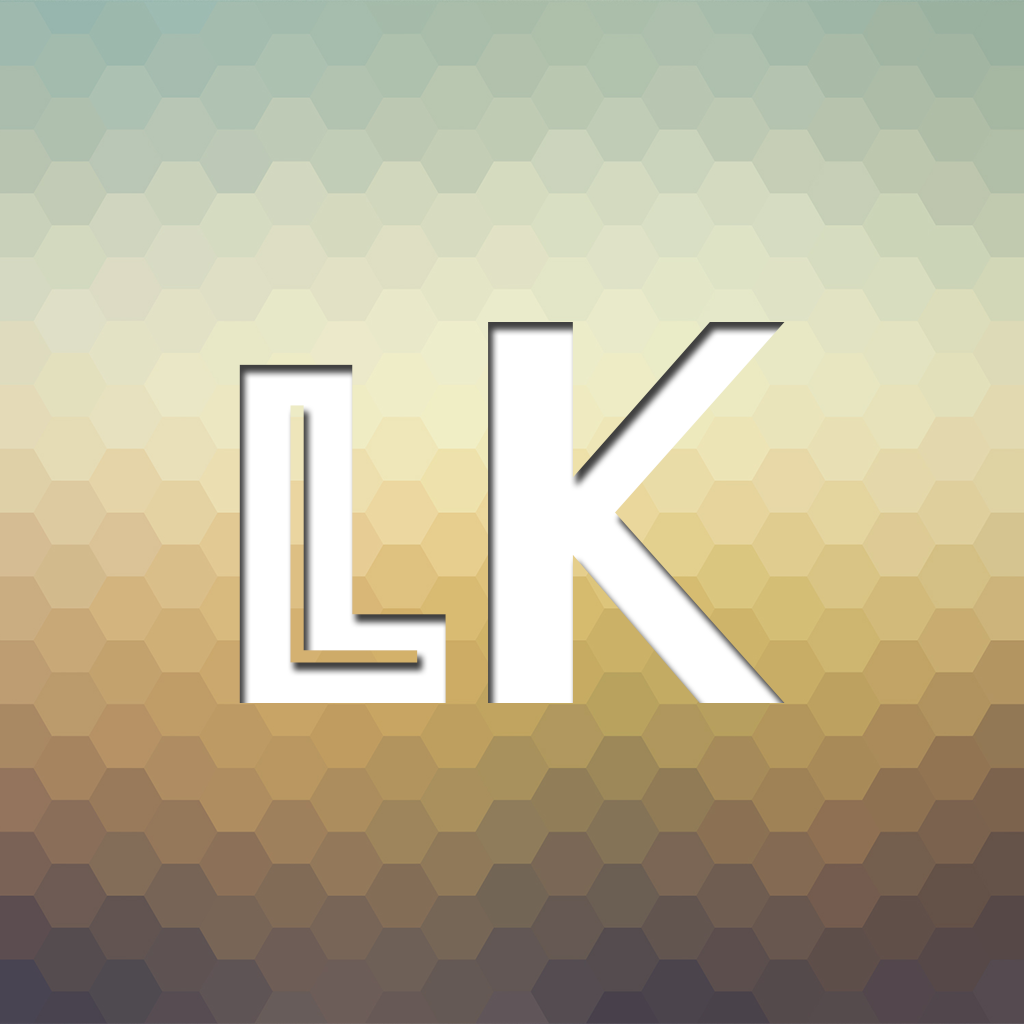
<style>
.page{position:relative;width:1024px;height:1024px}
.page>*{position:absolute;margin:0}
.t1{font:507.4px "Phosphate-Inline";color:#ffffff}
.t2{font:507.4px "Silom";color:#ffffff}
</style>
<div class="page">
<p class="t1" style="left:239px;top:322px;width:546px;height:381px">L<span class="t2">K</span></p>
</div>
